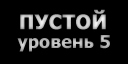
<style>
.page{position:relative;width:128px;height:64px;background:#000000}
.page>*{position:absolute;margin:0}
.t1{font:20px "Tahoma-Bold";color:#c7c7c7;font-weight:bold}
.t2{font:18px "Tahoma-Bold";color:#b5b5b5}
</style>
<div class="page">
<p class="t1" style="left:20px;top:9px;width:86px;height:21px">ПУСТОЙ</p>
<p class="t2" style="left:17px;top:35px;width:93px;height:17px">уровень 5</p>
</div>
